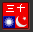
<style>
.page{position:relative;width:33px;height:32px;background:#f20000}
.page>*{position:absolute;margin:0}
.t1{font:10.4px "SimSun";color:#ffffff}
</style>
<div class="page">
<p class="t1" style="left:6px;top:4px;width:19px;height:8px">三十</p>
</div>
